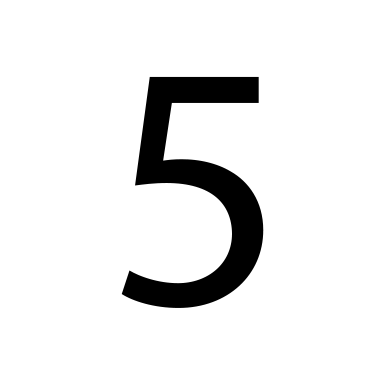
<style>
.page{position:relative;width:384px;height:384px;background:#ffffff}
.page>*{position:absolute;margin:0}
.t1{font:350px "MyriadPro-Regular";color:#000000}
</style>
<div class="page">
<p class="t1" style="left:121px;top:76px;width:143px;height:232px">5</p>
</div>
